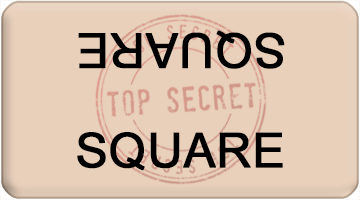
<style>
.page{position:relative;width:360px;height:200px;background:#e8d0bb}
.page>*{position:absolute;margin:0}
.t1{font:48px "ArialMT";color:#000000;font-weight:bold}
</style>
<div class="page">
<p class="t1" style="left:78px;top:30px;width:207px;height:39px;rotate:180deg">SQUARE</p>
<p class="t1" style="left:77px;top:132px;width:206px;height:39px">SQUARE</p>
</div>
